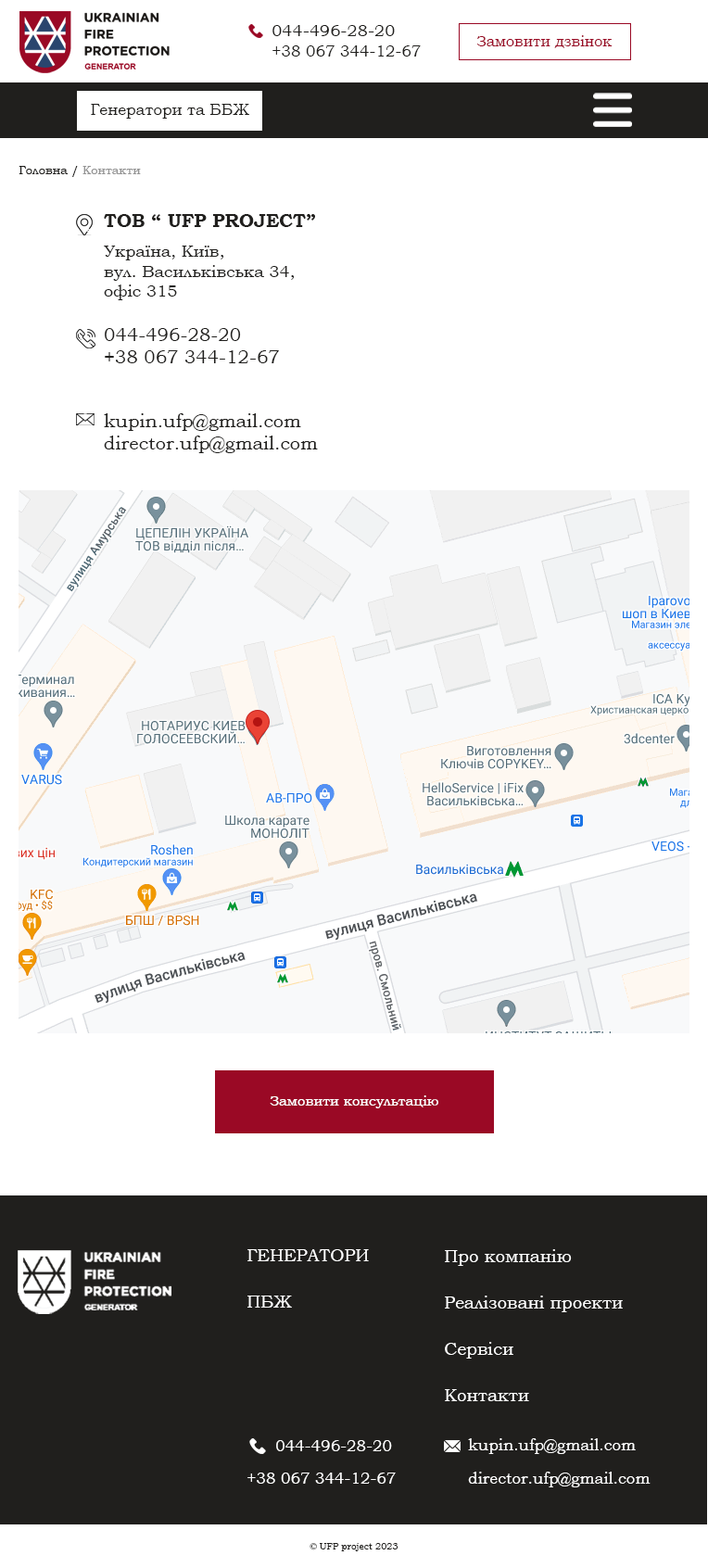
<style>
.page{position:relative;width:708px;height:1568px;background:#ffffff}
.page>*{position:absolute;margin:0}
.t1{font:15.8px/20.4px "BookmanOldStyle";color:#201f1d}
.t2{font:16.7px/20.4px "BookmanOldStyle";color:#201f1d}
.t3{font:14.8px "BookmanOldStyle";color:#9a0925}
.t4{font:15.8px "BookmanOldStyle";color:#201f1d}
.t5{font:12px "BookmanOldStyle";color:#201f1d}
.t6{font:12px "BookmanOldStyle";color:#959595}
.t7{font:18.5px "BookmanOldStyle-Bold";color:#201f1d}
.t8{font:16.7px "BookmanOldStyle";color:#201f1d}
.t9{font:18.5px "BookmanOldStyle";color:#201f1d}
.t10{font:13.9px "BookmanOldStyle";color:#ffffff}
.t11{font:17.6px/46.3px "BookmanOldStyle";color:#fefefe;text-transform:uppercase}
.t12{font:17.6px/46.3px "BookmanOldStyle";color:#fefefe}
.t13{font:17.6px/46.3px "BookmanOldStyle";color:#ffffff}
.t14{font:15.8px "BookmanOldStyle";color:#ffffff}
.t15{font:15.8px/33.4px "BookmanOldStyle";color:#ffffff}
.t16{font:9.3px "BookmanOldStyle";color:#201f1d}
</style>
<div class="page">
<p class="t1" style="left:272px;top:25px;width:149px;height:32px"><span class="t2">044-496-28-20<br></span>+38 067 344-12-67</p>
<p class="t3" style="left:477px;top:35px;width:136px;height:13px">Замовити дзвінок</p>
<p class="t4" style="left:91px;top:104px;width:158px;height:15px">Генератори та ББЖ</p>
<p class="t5" style="left:19px;top:166px;width:122px;height:11px">Головна / <span class="t6">Контакти</span></p>
<p class="t7" style="left:104px;top:214px;width:211px;height:13px">ТОВ “ UFP PROJECT”</p>
<p class="t8" style="left:104px;top:246px;width:191px;height:54px">Україна, Київ,<br>вул. Васильківська 34,<br>офіс 315</p>
<p class="t9" style="left:105px;top:328px;width:174px;height:35px">044-496-28-20<br>+38 067 344-12-67</p>
<p class="t9" style="left:104px;top:413px;width:214px;height:40px">kupin.ufp@gmail.com<br>director.ufp@gmail.com</p>
<p class="t10" style="left:270px;top:1095px;width:168px;height:13px">Замовити консультацію</p>
<p class="t11" style="left:247px;top:1249px;width:122px;height:59px">Генератори<br><span class="t12">ПБЖ</span></p>
<p class="t13" style="left:445px;top:1249px;width:178px;height:152px">Про компанію<br>Реалізовані проекти<br>Сервіси<br>Контакти</p>
<p class="t14" style="left:276px;top:1440px;width:116px;height:11px">044-496-28-20</p>
<p class="t15" style="left:468px;top:1438px;width:183px;height:49px">kupin.ufp@gmail.com<br>director.ufp@gmail.com</p>
<p class="t14" style="left:247px;top:1473px;width:149px;height:11px">+38 067 344-12-67</p>
<p class="t16" style="left:310px;top:1543px;width:88px;height:8px">© UFP project 2023</p>
</div>
